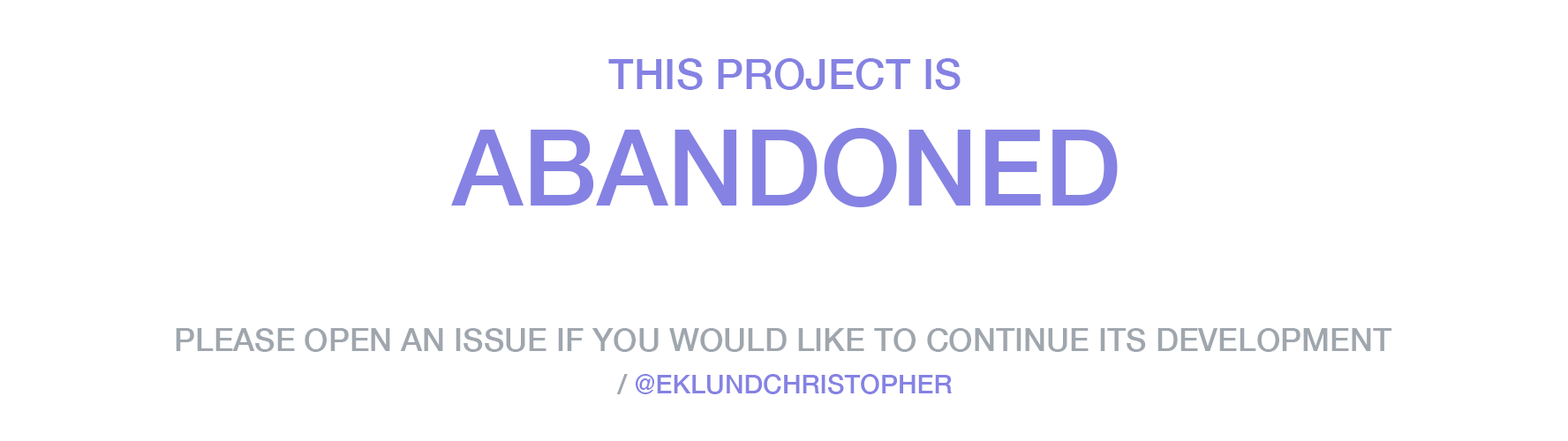
<style>
.page{position:relative;width:1568px;height:441px;background:#ffffff}
.page>*{position:absolute;margin:0}
.t1{font:42.4px "HelveticaNeue-Medium";color:#8582e3;text-transform:uppercase}
.t2{font:105.9px "HelveticaNeue-Medium";color:#8582e3;text-transform:uppercase}
.t3{font:31.8px "HelveticaNeue-Medium";color:#9fa6ad;text-transform:uppercase}
.t4{font:26.5px "HelveticaNeue-Medium";color:#8582e3;text-transform:uppercase}
.t5{font:26.5px "HelveticaNeue-Medium";color:#9fa6ad;text-transform:uppercase}
</style>
<div class="page">
<p class="t1" style="left:608px;top:58px;width:353px;height:32px">this project is</p>
<p class="t2" style="left:451px;top:128px;width:667px;height:79px">ABANDONED</p>
<p class="t3" style="left:176px;top:328px;width:1216px;height:24px">please open an issue if you would like to continue its development</p>
<p class="t4" style="left:616px;top:374px;width:336px;height:21px"><span class="t5">/ </span>@eklundchristopher</p>
</div>
